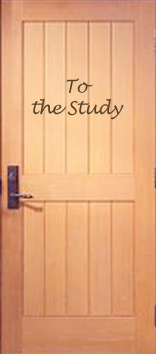
<style>
.page{position:relative;width:156px;height:354px}
.page>*{position:absolute;margin:0}
.t1{font:18px "LucidaHandwriting-Italic";letter-spacing:-0.025em;color:#57432a}
</style>
<div class="page">
<p class="t1" style="left:31px;top:78px;width:93px;height:42px;text-align:center">To<br>the Study</p>
</div>
